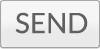
<style>
.page{position:relative;width:100px;height:49px;background:#f6f6f6}
.page>*{position:absolute;margin:0}
.t1{font:28px "Lato-Regular";color:#606060}
</style>
<div class="page">
<p class="t1" style="left:15px;top:12px;width:73px;height:22px">SEND</p>
</div>
